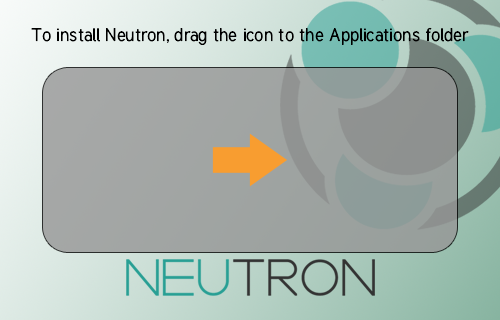
<style>
.page{position:relative;width:500px;height:320px}
.page>*{position:absolute;margin:0}
.t1{font:18px "Tuffy";color:#000000}
</style>
<div class="page">
<p class="t1" style="left:31px;top:27px;width:438px;height:18px">To install Neutron, drag the icon to the Applications folder</p>
</div>
